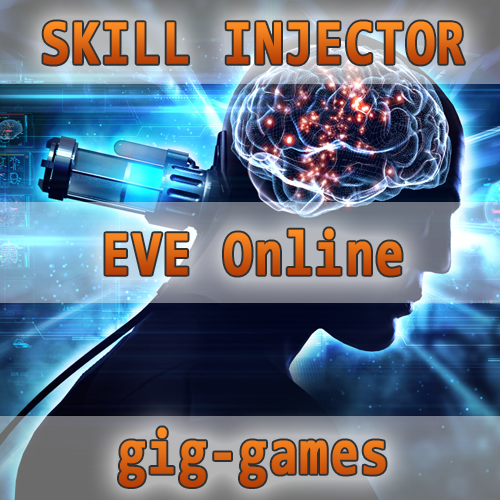
<style>
.page{position:relative;width:500px;height:500px}
.page>*{position:absolute;margin:0}
.t1{font:64px "Consolas-Bold";letter-spacing:0.025em;font-weight:bold;scale:0.79 1}
</style>
<div class="page">
<p class="t1" style="left:43px;top:21px;width:421px;height:44px">SKILL INJECTOR</p>
<p class="t1" style="left:105px;top:228px;width:297px;height:48px">EVE Online</p>
<p class="t1" style="left:119px;top:427px;width:267px;height:60px">gig-games</p>
</div>
